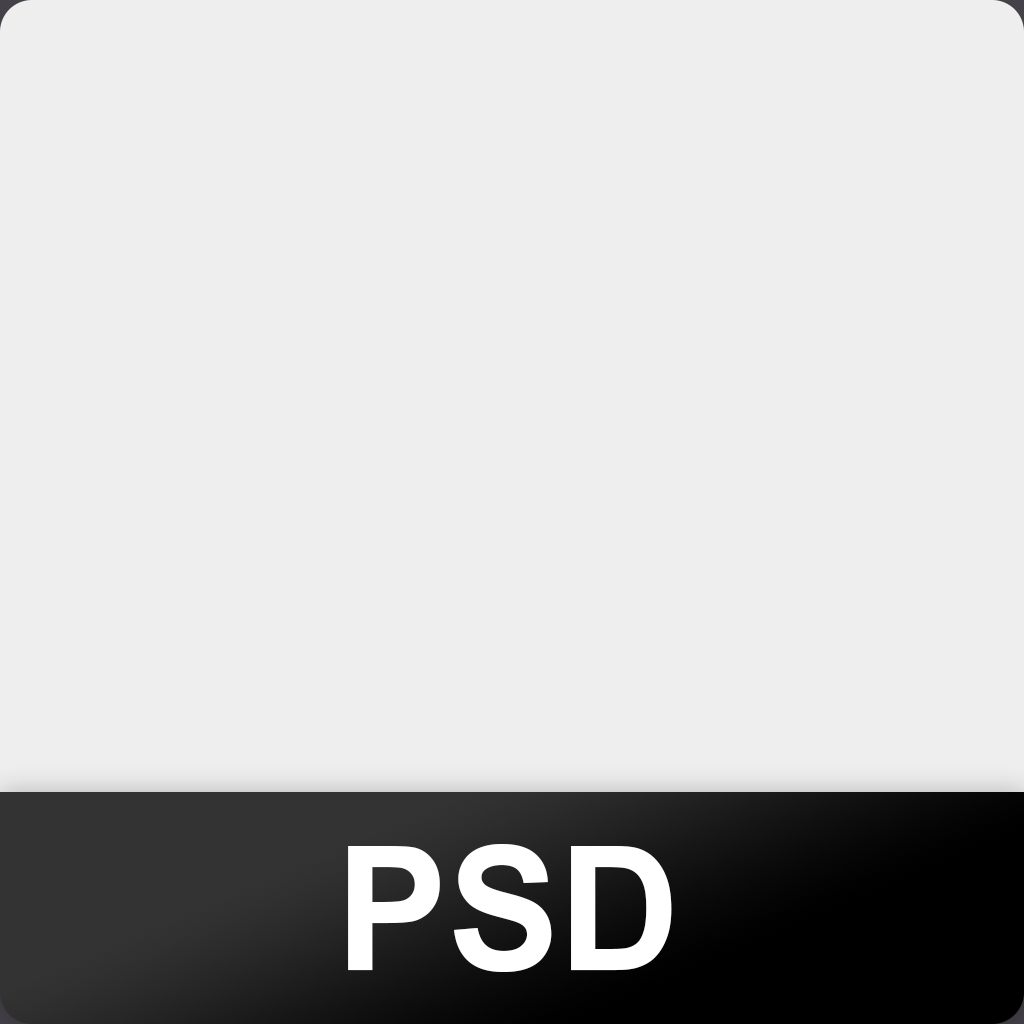
<style>
.page{position:relative;width:1024px;height:1024px;background:#eeeeee}
.page>*{position:absolute;margin:0}
.t1{font:172.6px "Arial-BoldMT";color:#ffffff}
</style>
<div class="page">
<p class="t1" style="left:348px;top:844px;width:324px;height:128px">PSD</p>
</div>
